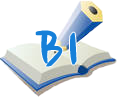
<style>
.page{position:relative;width:120px;height:97px;background:#ffffff}
.page>*{position:absolute;margin:0}
.t1{font:58.7px "NanumBrush";color:#1680d9;font-weight:bold}
</style>
<div class="page">
<p class="t1" style="left:35px;top:30px;width:42px;height:37px">B1</p>
</div>
